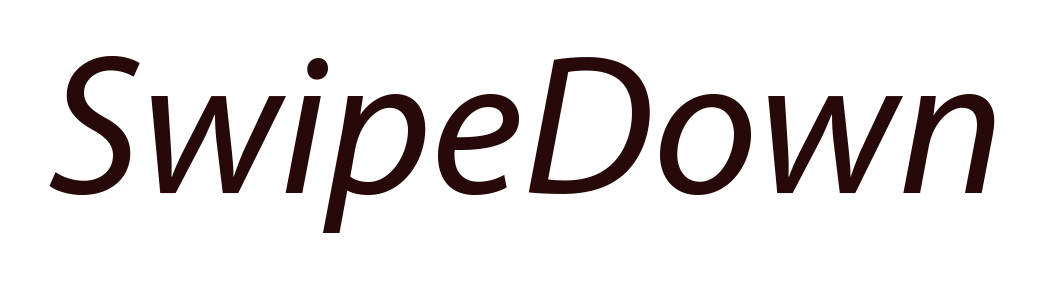
<style>
.page{position:relative;width:1057px;height:283px;background:#ffffff}
.page>*{position:absolute;margin:0}
.t1{font:200px "MyriadPro-It";color:#270909}
</style>
<div class="page">
<p class="t1" style="left:49px;top:55px;width:946px;height:178px">SwipeDown</p>
</div>
